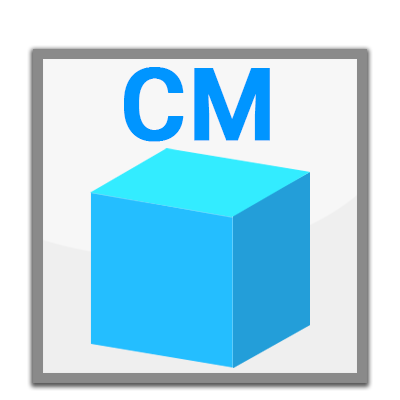
<style>
.page{position:relative;width:400px;height:400px;background:#ffffff}
.page>*{position:absolute;margin:0}
.t1{font:100px "Roboto-Medium";color:#0095ff;font-weight:bold}
</style>
<div class="page">
<p class="t1" style="left:124px;top:67px;width:146px;height:75px">CM</p>
</div>
